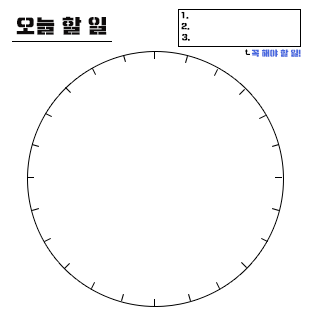
<style>
.page{position:relative;width:310px;height:310px;background:#ffffff}
.page>*{position:absolute;margin:0}
.t1{font:20px "Typo_SsangmunDong_St";color:#0e0b0b}
.t2{font:8px "Typo_SsangmunDong_St";color:#000000}
.t3{font:8px "Typo_SsangmunDong_St";color:#4868de}
</style>
<div class="page">
<p class="t1" style="left:16px;top:16px;width:91px;height:19px">오늘 할 일</p>
<p class="t2" style="left:181px;top:11px;width:8px;height:8px">1.</p>
<p class="t2" style="left:181px;top:22px;width:9px;height:8px">2.</p>
<p class="t2" style="left:182px;top:33px;width:8px;height:8px">3.</p>
<p class="t3" style="left:251px;top:49px;width:50px;height:8px">꼭 해야 할 일!</p>
</div>
